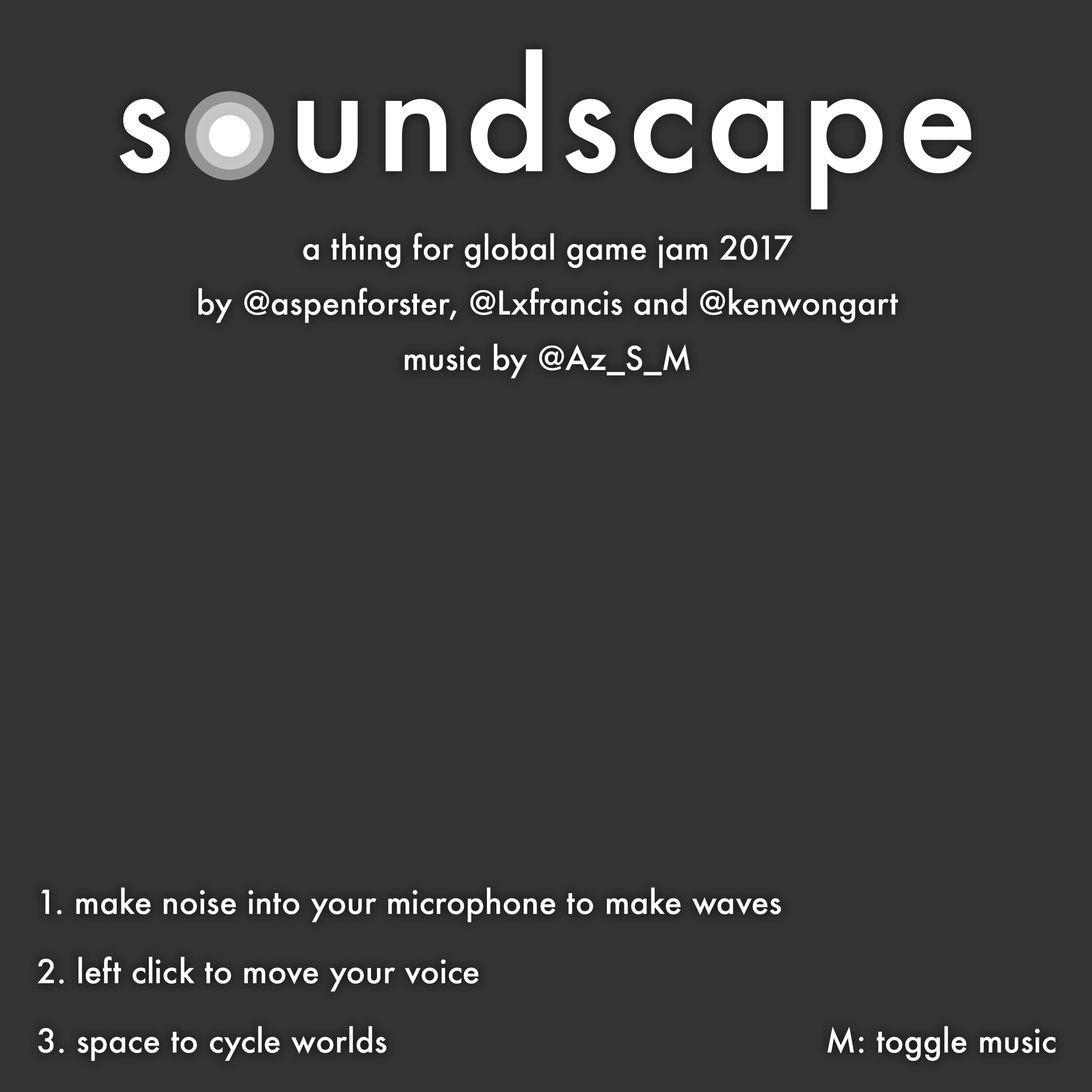
<style>
.page{position:relative;width:1092px;height:1092px;background:#333333}
.page>*{position:absolute;margin:0}
.t1{font:147.7px "Futura-Medium";letter-spacing:0.05em;color:#ffffff}
.t2{font:32px/55.3px "Futura-Medium";color:#ffffff}
.t3{font:32px/69.3px "Futura-Medium";color:#ffffff}
.t4{font:32px "Futura-Medium";color:#ffffff}
</style>
<div class="page">
<p class="t1" style="left:119px;top:49px;width:853px;height:161px">s  undscape</p>
<p class="t2" style="left:198px;top:232px;width:700px;height:147px;text-align:center">a thing for global game jam 2017<br>by @aspenforster, @Lxfrancis and @kenwongart<br>music by @Az_S_M</p>
<p class="t3" style="left:37px;top:887px;width:744px;height:174px">1. make noise into your microphone to make waves<br>2. left click to move your voice<br>3. space to cycle worlds</p>
<p class="t4" style="left:827px;top:1026px;width:229px;height:35px">M: toggle music</p>
</div>
